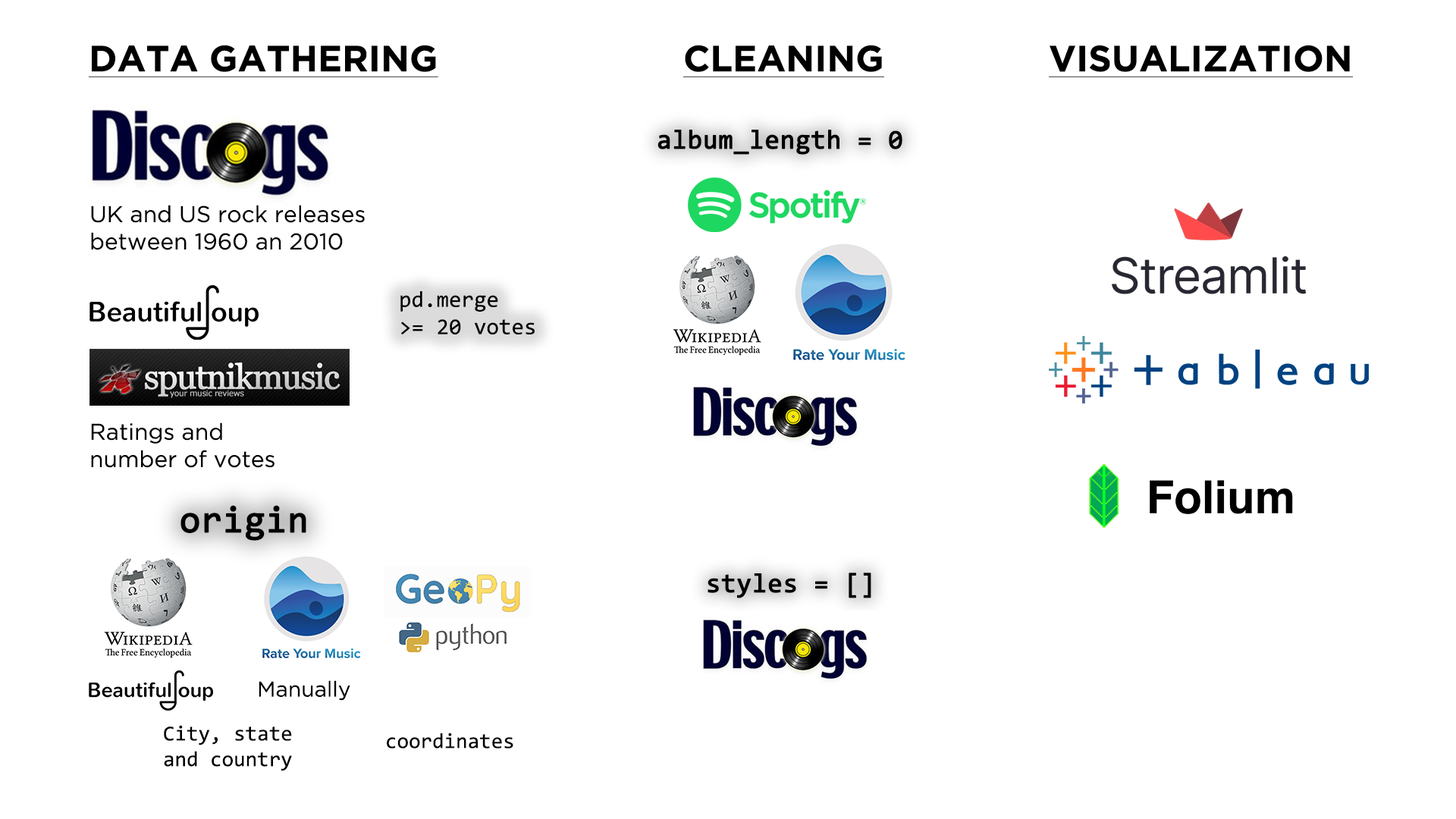
<style>
.page{position:relative;width:1456px;height:819px;background:#ffffff}
.page>*{position:absolute;margin:0}
.t1{font:36.4px "GothamBold";color:#000000;text-decoration:underline}
.t2{font:26.8px "Consolas";color:#000000;font-weight:bold}
.t3{font:22.7px "GothamBook";color:#000000}
.t4{font:22.7px "Consolas";color:#000000}
.t5{font:37.5px "Consolas";color:#000000;font-weight:bold}
.t6{font:21.4px "GothamBook";color:#000000}
.t7{font:21.4px "Consolas";color:#000000}
</style>
<div class="page">
<p class="t1" style="left:89px;top:45px;width:349px;height:32px">DATA GATHERING</p>
<p class="t1" style="left:683px;top:45px;width:201px;height:32px">CLEANING</p>
<p class="t1" style="left:1049px;top:45px;width:304px;height:32px">VISUALIZATION</p>
<p class="t2" style="left:657px;top:130px;width:245px;height:25px">album_length = 0</p>
<p class="t3" style="left:91px;top:205px;width:274px;height:45px">UK and US rock releases between 1960 an 2010</p>
<p class="t4" style="left:400px;top:291px;width:135px;height:43px">pd.merge<br>&gt;= 20 votes</p>
<p class="t3" style="left:91px;top:422px;width:184px;height:46px">Ratings and<br>number of votes</p>
<p class="t5" style="left:180px;top:505px;width:126px;height:36px">origin</p>
<p class="t2" style="left:708px;top:573px;width:163px;height:25px">styles = []</p>
<p class="t6" style="left:259px;top:680px;width:91px;height:21px">Manually</p>
<p class="t7" style="left:164px;top:725px;width:128px;height:46px">City, state and country</p>
<p class="t7" style="left:387px;top:733px;width:126px;height:15px">coordinates</p>
</div>
